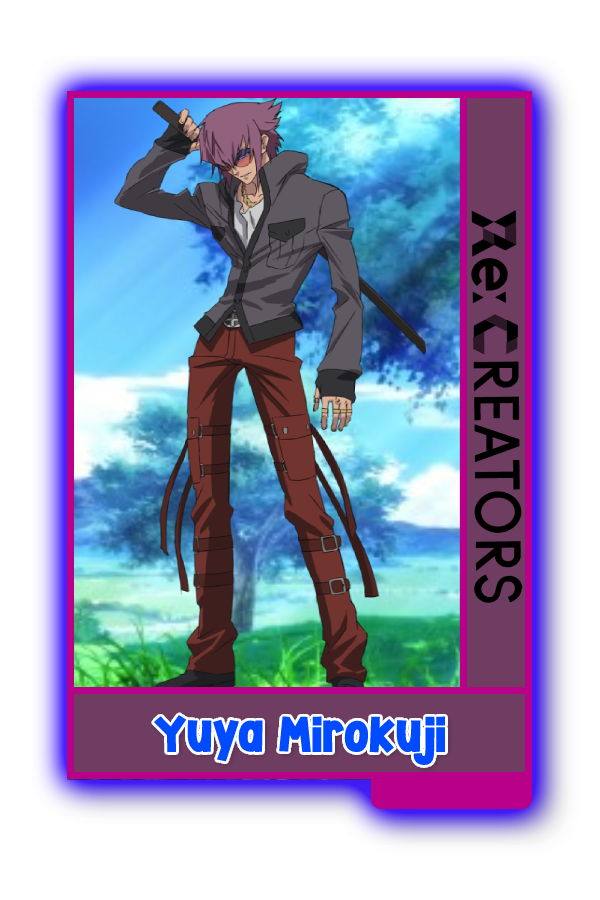
<style>
.page{position:relative;width:600px;height:900px;background:#ffffff}
.page>*{position:absolute;margin:0}
.t1{font:60px "Yokelvision";color:#004bff}
</style>
<div class="page">
<p class="t1" style="left:153px;top:715px;width:293px;height:50px">Yuya Mirokuji</p>
</div>
